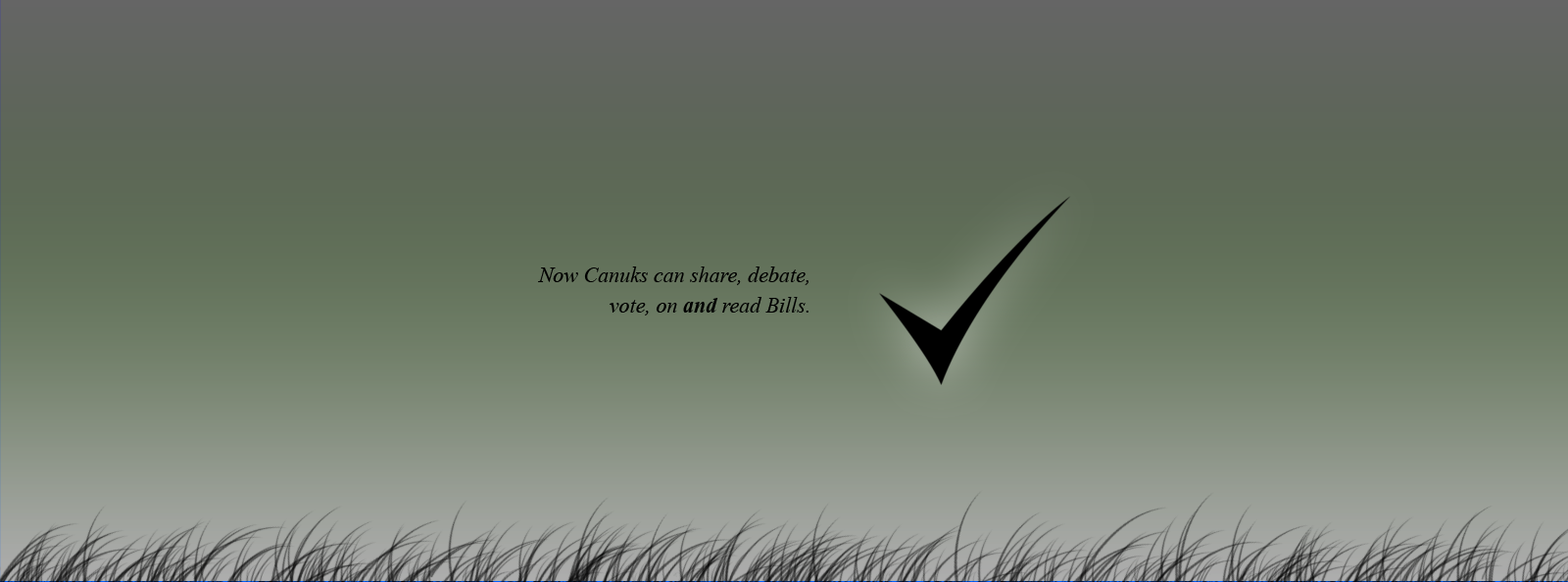
<style>
.page{position:relative;width:1568px;height:582px}
.page>*{position:absolute;margin:0}
.t1{font:21.6px/30.4px "TimesNewRomanPS-ItalicMT";color:#000000}
.t2{font:21.6px/30.4px "TimesNewRomanPS-BoldItalicMT";color:#000000}
</style>
<div class="page">
<p class="t1" style="left:538px;top:267px;width:270px;height:49px;text-align:right">Now Canuks can share, debate, vote, on <span class="t2">and </span>read Bills.</p>
</div>
